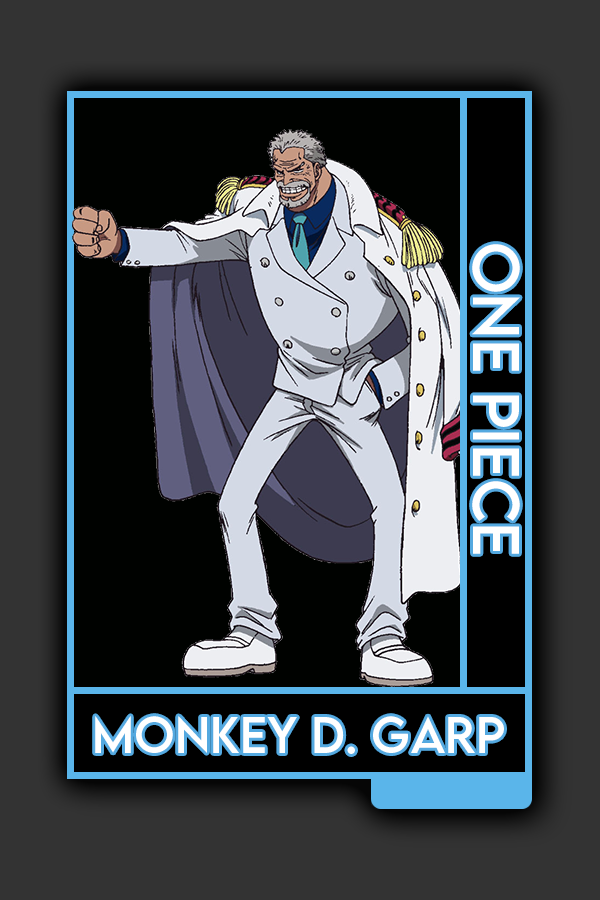
<style>
.page{position:relative;width:600px;height:900px;background:#333333}
.page>*{position:absolute;margin:0}
.t1{font:58.4px "LEMONMILK-Regular";color:#ffffff}
.t2{font:45.6px "LEMONMILK-Regular";color:#ffffff}
</style>
<div class="page">
<p class="t1" style="left:472px;top:244px;width:48px;height:310px;rotate:90deg">One Piece</p>
<p class="t2" style="left:95px;top:716px;width:409px;height:38px">Monkey D. Garp</p>
</div>
